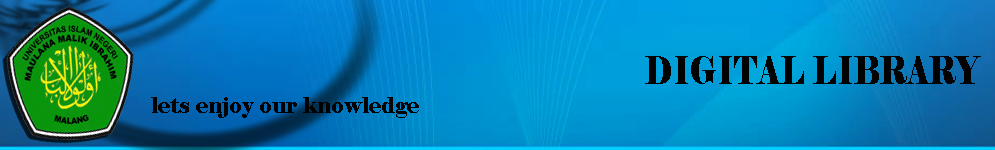
<style>
.page{position:relative;width:995px;height:150px}
.page>*{position:absolute;margin:0}
.t1{font:39px "Elephant-Regular";color:#020202;scale:0.76 1}
.t2{font:21.8px "Elephant-Regular";color:#020202}
</style>
<div class="page">
<p class="t1" style="left:645px;top:56px;width:336px;height:28px">DIGITAL LIBRARY</p>
<p class="t2" style="left:151px;top:97px;width:268px;height:21px">lets enjoy our knowledge</p>
</div>
